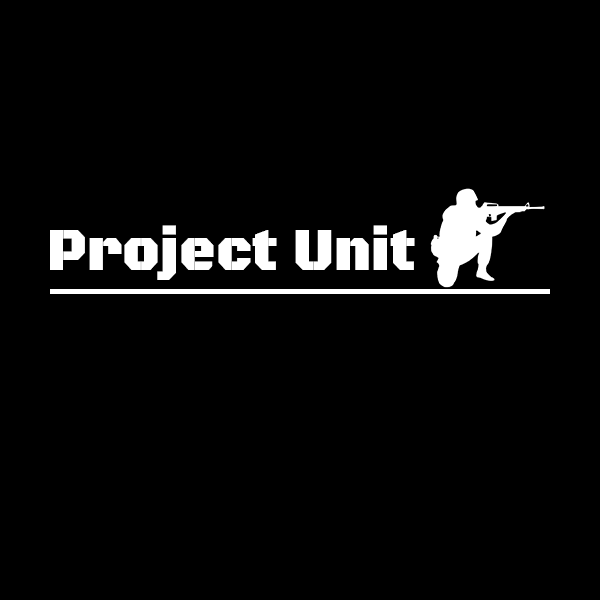
<style>
.page{position:relative;width:600px;height:600px;background:#000000}
.page>*{position:absolute;margin:0}
.t1{font:60px "BlackOpsOne-Regular";color:#ffffff;font-weight:bold;scale:0.9 1}
</style>
<div class="page">
<p class="t1" style="left:50px;top:225px;width:365px;height:55px">Project Unit</p>
</div>
